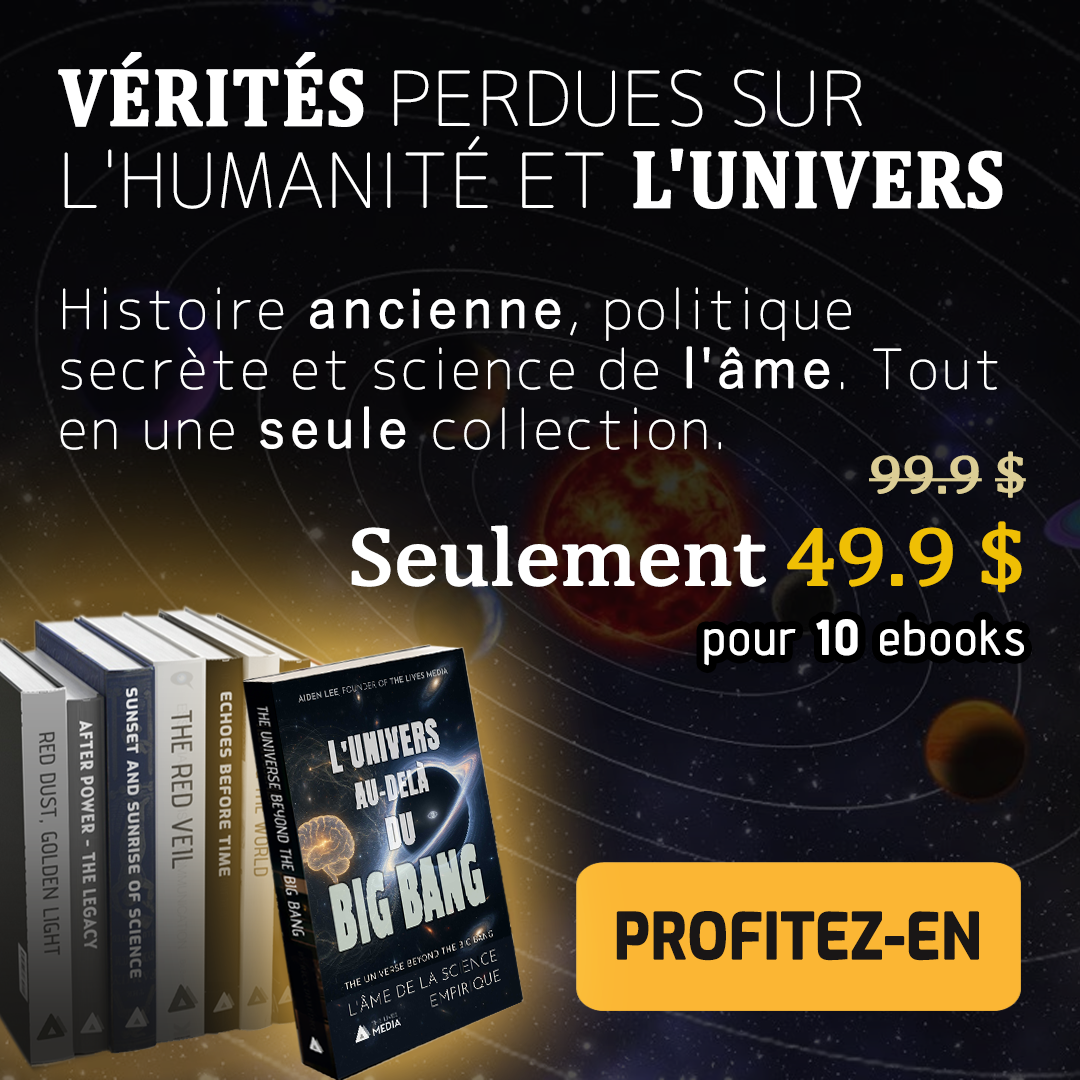
<style>
.page{position:relative;width:1080px;height:1080px}
.page>*{position:absolute;margin:0}
.t1{font:73.8px/82px "Chogokuboso-Gothic";letter-spacing:0.005em;color:#ffffff;font-weight:bold}
.t2{font:82px/82px "Cambria-Bold";letter-spacing:0.005em;color:#ffffff;font-weight:bold;scale:0.9 1}
.t3{font:54px/60px "Chogokuboso-Gothic";letter-spacing:0.05em;color:#ffffff;font-weight:bold}
.t4{font:54px/60px "YuGothic-Regular";letter-spacing:0.05em;color:#ffffff;font-weight:bold}
.t5{font:82.8px/92px "Cambria";letter-spacing:-0.025em;color:#ffffff;font-weight:bold;scale:1.11 1}
.t6{font:54px/92px "Cambria";letter-spacing:-0.025em;color:#dbcd95;font-weight:bold;scale:1.11 1}
.t7{font:82.8px/92px "Cambria";letter-spacing:-0.025em;color:#efbf04;font-weight:bold;scale:1.11 1}
.t8{font:48px "AdventPro-Regular";letter-spacing:0.05em;color:#ffffff;font-weight:bold}
.t9{font:48px "AdventPro-Bold";letter-spacing:0.05em;color:#ffffff;font-weight:bold}
.t10{font:63px "Exo-Bold";color:#191616;font-weight:bold;scale:0.9 1}
</style>
<div class="page">
<p class="t1" style="left:58px;top:52px;width:945px;height:157px"><span class="t2">VÉRITÉS </span>PERDUES SUR L'HUMANITÉ ET <span class="t2">L'UNIVERS</span></p>
<p class="t3" style="left:60px;top:287px;width:938px;height:163px">Histoire <span class="t4">ancienne</span>, politique secrète et science de <span class="t4">l'âme</span>. Tout en une <span class="t4">seule </span>collection.</p>
<p class="t5" style="left:351px;top:451px;width:675px;height:142px;text-align:right"><span class="t6">99.9 $<br></span>Seulement<span class="t7"> 49.9 $</span></p>
<p class="t8" style="left:704px;top:619px;width:320px;height:47px">pour <span class="t9">10</span> ebooks</p>
<p class="t10" style="left:616px;top:911px;width:363px;height:50px">PROFITEZ-EN</p>
</div>
